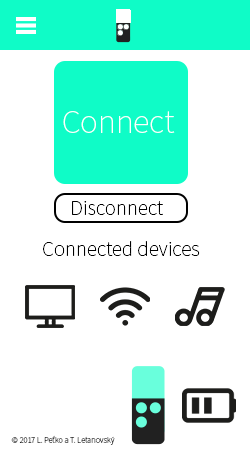
<style>
.page{position:relative;width:250px;height:450px;background:#ffffff}
.page>*{position:absolute;margin:0}
.t1{font:33.3px "SourceSansPro-ExtraLight";color:#ffffff}
.t2{font:20.8px "SourceSansPro-ExtraLight";color:#000000}
.t3{font:8.3px "SourceSansPro-ExtraLight"}
</style>
<div class="page">
<p class="t1" style="left:63px;top:111px;width:112px;height:22px">Connect</p>
<p class="t2" style="left:72px;top:201px;width:91px;height:14px">Disconnect</p>
<p class="t2" style="left:43px;top:241px;width:157px;height:15px">Connected devices</p>
<p class="t3" style="left:11px;top:435px;width:104px;height:10px">© 2017 L. Peťko a T. Letanovský</p>
</div>
